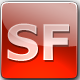
<style>
.page{position:relative;width:80px;height:80px}
.page>*{position:absolute;margin:0}
.t1{font:48.9px "Verdana-Bold";text-transform:uppercase}
</style>
<div class="page">
<p class="t1" style="left:7px;top:23px;width:62px;height:38px">SF</p>
</div>
